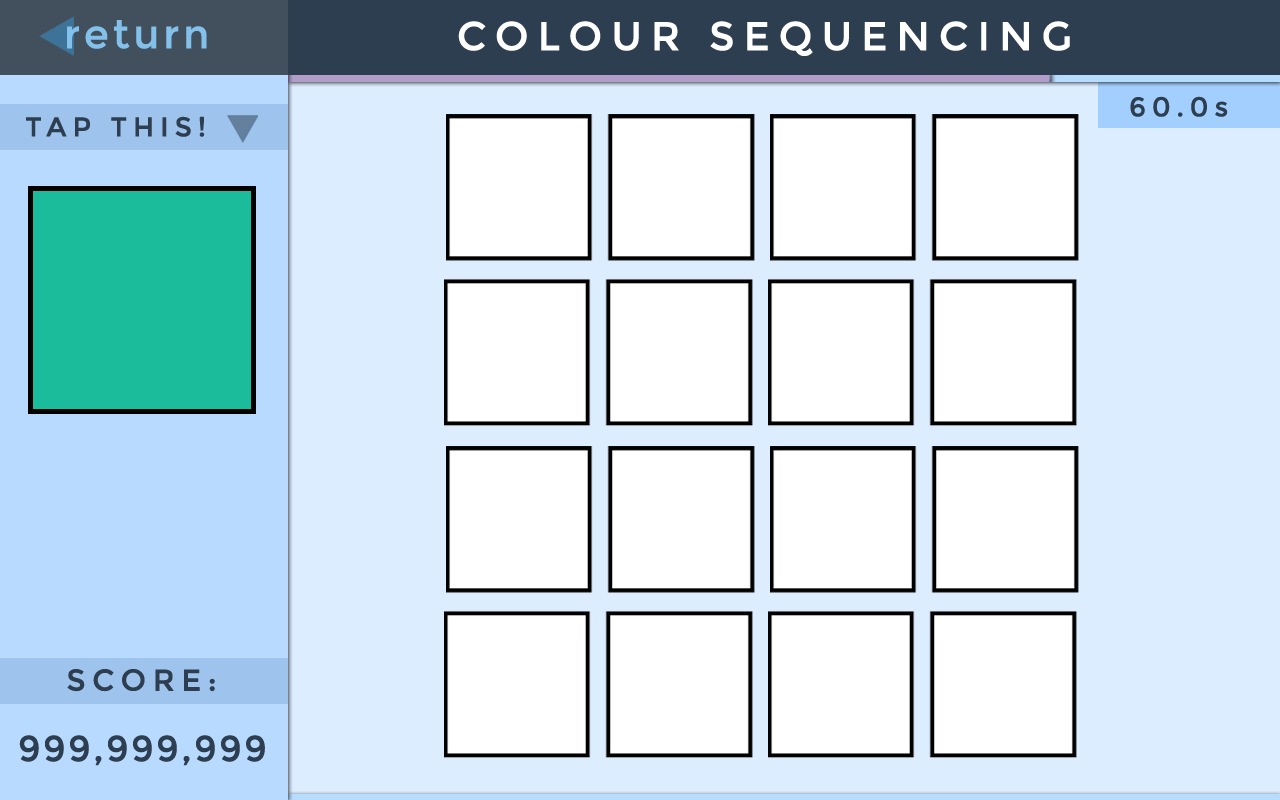
<style>
.page{position:relative;width:1280px;height:800px;background:#dcedff}
.page>*{position:absolute;margin:0}
.t1{font:40px "Montserrat-Regular";letter-spacing:0.075em;color:#83c1eb;font-weight:bold}
.t2{font:40px "Montserrat-Regular";letter-spacing:0.2em;color:#ffffff;text-transform:uppercase;font-weight:bold}
.t3{font:27px "Montserrat-Regular";letter-spacing:0.2em;color:#2d3e50;text-transform:uppercase;font-weight:bold}
.t4{font:27px "Montserrat-Regular";letter-spacing:0.2em;color:#2d3e50;font-weight:bold}
.t5{font:30px "Montserrat-Regular";letter-spacing:0.2em;color:#2d3e50;font-weight:bold}
.t6{font:36px "Montserrat-Regular";letter-spacing:0.05em;color:#2d3e50;font-weight:bold}
</style>
<div class="page">
<p class="t1" style="left:67px;top:20px;width:140px;height:29px">return</p>
<p class="t2" style="left:458px;top:21px;width:612px;height:35px">Colour Sequencing</p>
<p class="t3" style="left:1130px;top:96px;width:98px;height:21px">60.0<span class="t4">s</span></p>
<p class="t3" style="left:26px;top:116px;width:179px;height:21px">Tap This!</p>
<p class="t5" style="left:67px;top:669px;width:148px;height:23px">SCORE:</p>
<p class="t6" style="left:19px;top:735px;width:246px;height:31px">999,999,999</p>
</div>
